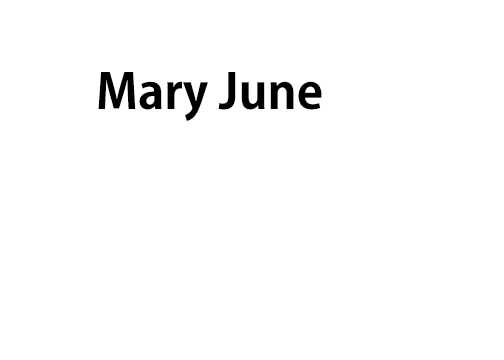
<style>
.page{position:relative;width:504px;height:360px;background:#ffffff}
.page>*{position:absolute;margin:0}
.t1{font:48px "AdobeGothicStd-Bold";color:#000000}
</style>
<div class="page">
<p class="t1" style="left:98px;top:72px;width:224px;height:49px">Mary June</p>
</div>
